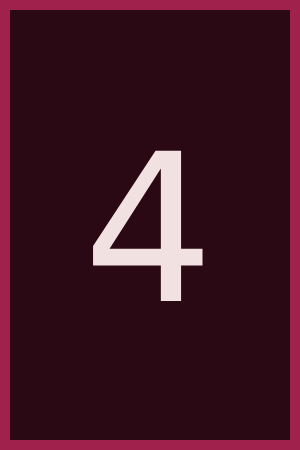
<style>
.page{position:relative;width:300px;height:450px;background:#2a0914}
.page>*{position:absolute;margin:0}
.t1{font:206px "DejaVuSans";color:#f2e1e1}
</style>
<div class="page">
<p class="t1" style="left:93px;top:150px;width:110px;height:151px">4</p>
</div>
